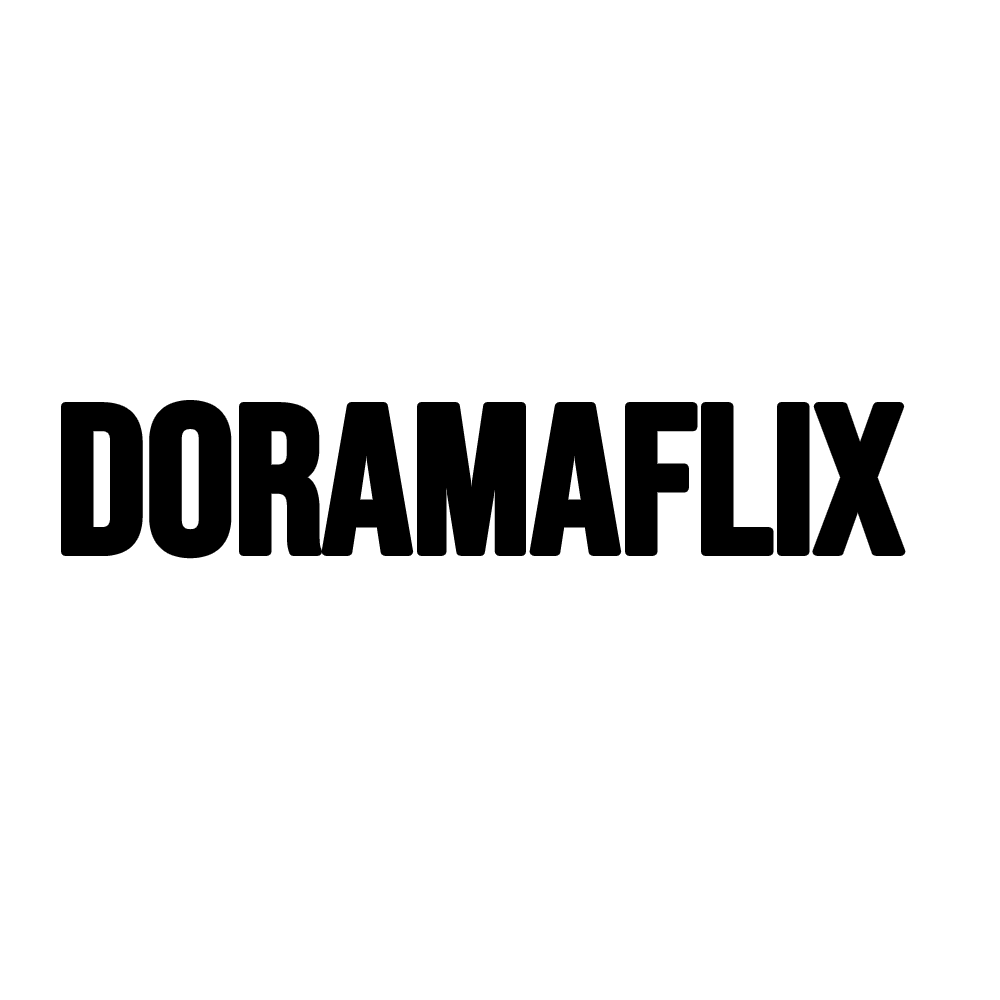
<style>
.page{position:relative;width:1000px;height:1000px;background:#ffffff}
.page>*{position:absolute;margin:0}
.t1{font:208.3px "BebasNeue-Regular";color:#000000;scale:1.06 1}
</style>
<div class="page">
<p class="t1" style="left:65px;top:404px;width:837px;height:151px">Doramaflix</p>
</div>
